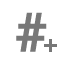
<style>
.page{position:relative;width:64px;height:64px;background:#ffffff}
.page>*{position:absolute;margin:0}
.t1{font:55px "Roboto-Black";color:#777777}
</style>
<div class="page">
<p class="t1" style="left:16px;top:12px;width:31px;height:40px">#</p>
</div>
